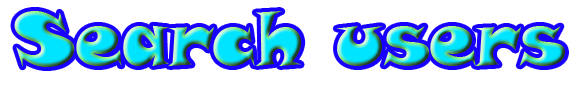
<style>
.page{position:relative;width:576px;height:90px;background:#ffffff}
.page>*{position:absolute;margin:0}
.t1{font:74.3px "SnapITC-Regular"}
</style>
<div class="page">
<p class="t1" style="left:14px;top:11px;width:551px;height:56px">Search users</p>
</div>
